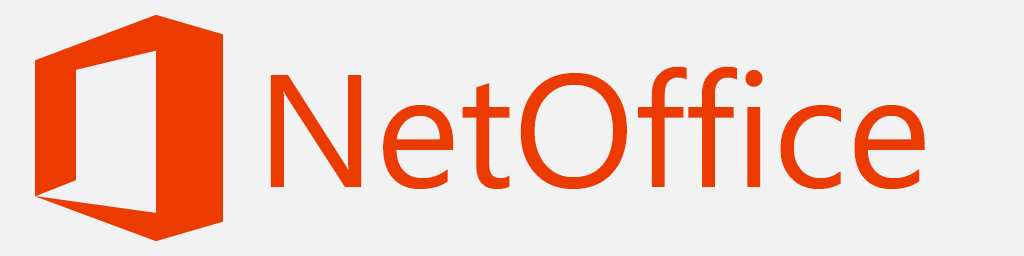
<style>
.page{position:relative;width:1024px;height:256px;background:#f2f2f2}
.page>*{position:absolute;margin:0}
.t1{font:160px "SegoeUI";color:#eb3b00}
</style>
<div class="page">
<p class="t1" style="left:270px;top:66px;width:655px;height:123px">NetOffice</p>
</div>
